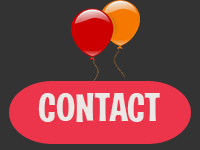
<style>
.page{position:relative;width:200px;height:150px;background:#333333}
.page>*{position:absolute;margin:0}
.t1{font:41.7px "LasVegas-Jackpot";color:#ebe7e5;text-transform:uppercase;scale:1.21 1}
</style>
<div class="page">
<p class="t1" style="left:38px;top:93px;width:122px;height:29px">contact</p>
</div>
